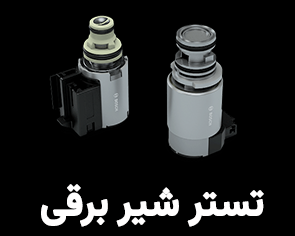
<style>
.page{position:relative;width:295px;height:236px;background:#000000}
.page>*{position:absolute;margin:0}
.t1{font:39.8px "Vazirmatn-Bold";letter-spacing:-0.01em;color:#fffefe;font-weight:bold;scale:0.94 1}
</style>
<div class="page">
<p class="t1" style="left:41px;top:184px;width:223px;height:43px">تستر شیر برقی</p>
</div>
